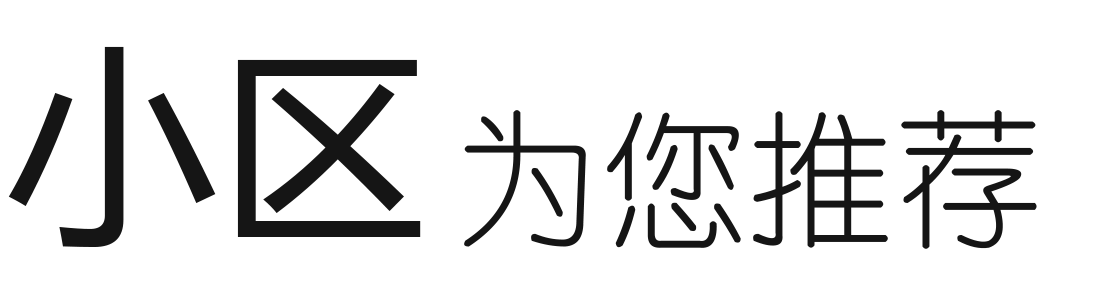
<style>
.page{position:relative;width:1100px;height:300px;background:#ffffff}
.page>*{position:absolute;margin:0}
.t1{font:213.3px "MicrosoftYaHei";color:#151515}
.t2{font:146.7px "YouYuan";color:#151515}
</style>
<div class="page">
<p class="t1" style="left:8px;top:46px;width:413px;height:201px">小区</p>
<p class="t2" style="left:464px;top:110px;width:573px;height:139px">为您推荐</p>
</div>
